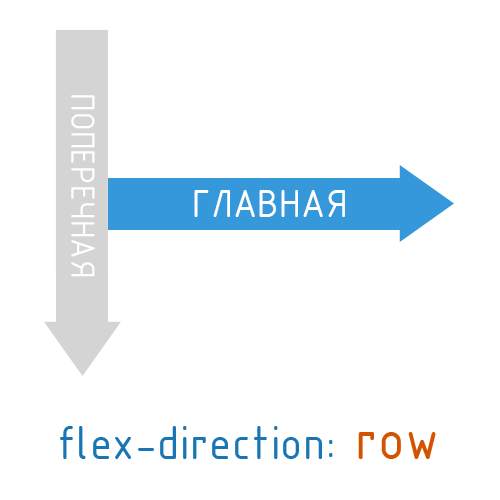
<style>
.page{position:relative;width:500px;height:500px;background:#ffffff}
.page>*{position:absolute;margin:0}
.t1{font:36.1px "ISOCPEUR";letter-spacing:0.006em;color:#ffffff}
.t2{font:42px "ISOCPEUR";letter-spacing:0.006em;color:#ffffff}
.t3{font:49.8px "ISOCPEUR";letter-spacing:0.006em;color:#1975b3}
.t4{font:59.2px "ISOCPEUR";letter-spacing:0.006em;color:#d35400}
</style>
<div class="page">
<p class="t1" style="left:71px;top:95px;width:24px;height:182px;rotate:90deg">ПОПЕРЕЧНАЯ</p>
<p class="t2" style="left:194px;top:190px;width:151px;height:27px">ГЛАВНАЯ</p>
<p class="t3" style="left:60px;top:426px;width:376px;height:33px">flex-direction: <span class="t4">row</span></p>
</div>
